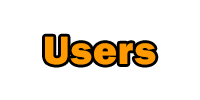
<style>
.page{position:relative;width:200px;height:100px;background:#ffffff}
.page>*{position:absolute;margin:0}
.t1{font:40.6px "FranklinGothic-Heavy";letter-spacing:0.025em;color:#ff8400}
</style>
<div class="page">
<p class="t1" style="left:45px;top:36px;width:111px;height:29px">Users</p>
</div>
